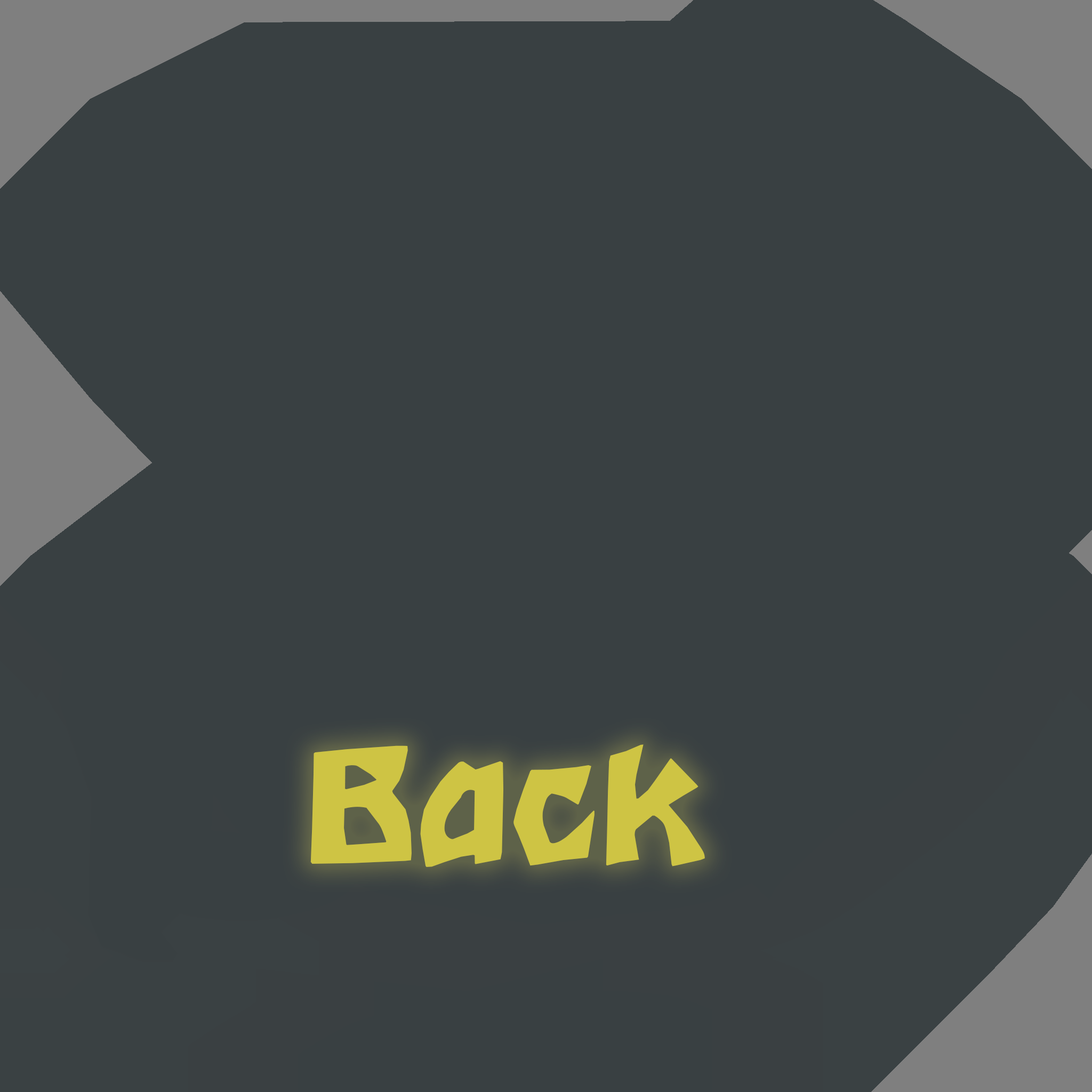
<style>
.page{position:relative;width:1092px;height:1092px;background:#394042}
.page>*{position:absolute;margin:0}
.t1{font:160px "Tarzan";color:#cec444}
</style>
<div class="page">
<p class="t1" style="left:310px;top:744px;width:395px;height:123px">Back</p>
</div>
